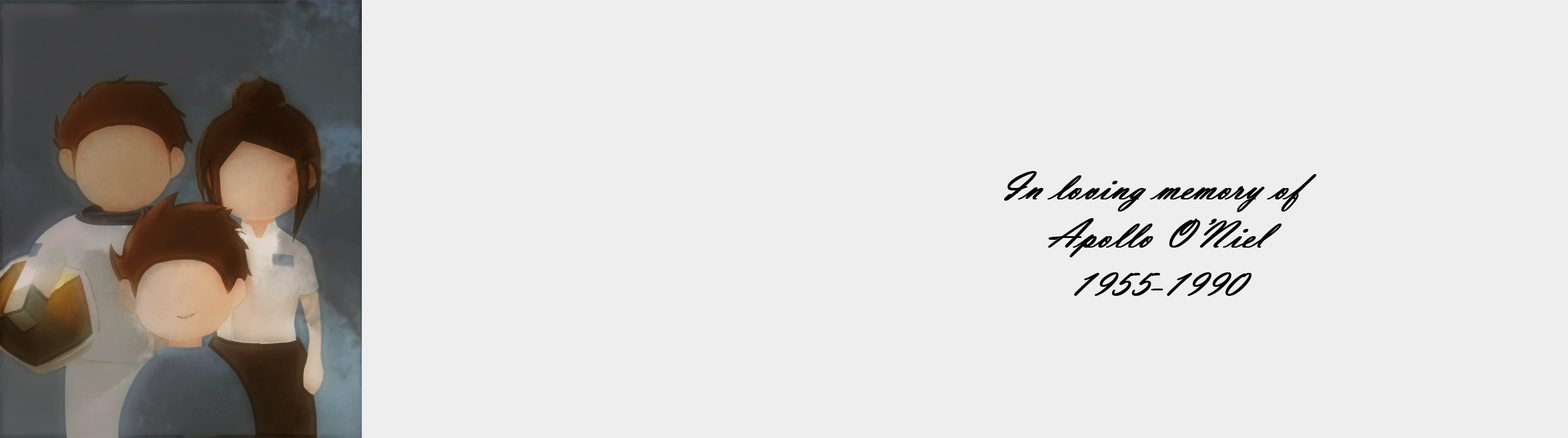
<style>
.page{position:relative;width:1568px;height:438px;background:#eeeeee}
.page>*{position:absolute;margin:0}
.t1{font:40.2px "VladimirScript";letter-spacing:0.005em;color:#000000;font-weight:bold;font-style:italic}
</style>
<div class="page">
<p class="t1" style="left:1004px;top:171px;width:313px;height:125px;text-align:center">In loving memory of <br>Apollo O’Niel<br>1955-1990</p>
</div>
